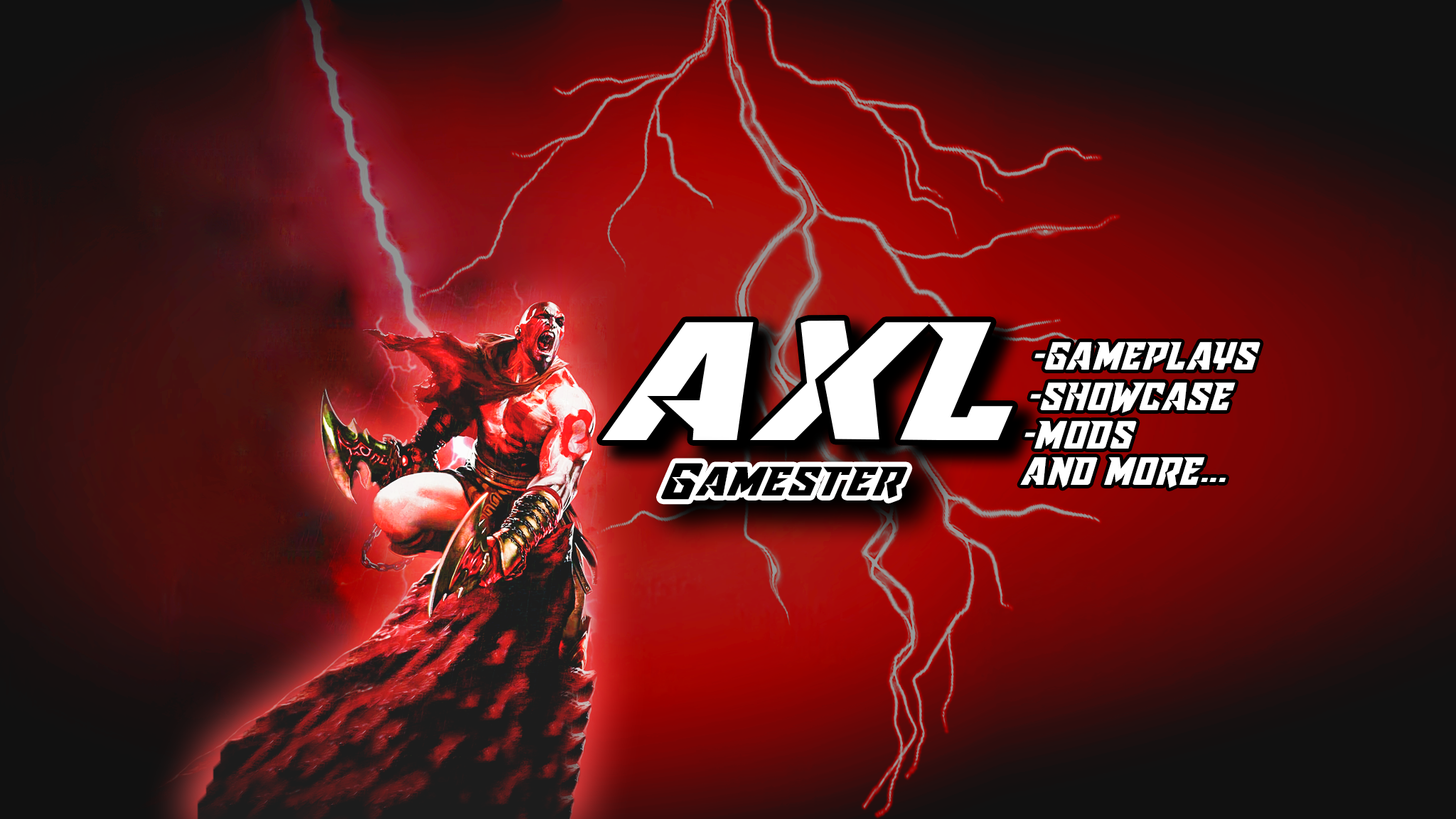
<style>
.page{position:relative;width:1456px;height:819px}
.page>*{position:absolute;margin:0}
.t1{font:31.3px "RaiderCrusaderExpanded";color:#ffffff}
.t2{font:40.9px "RaiderCrusader";color:#000000;scale:1.4 1}
</style>
<div class="page">
<p class="t1" style="left:1034px;top:342px;width:226px;height:28px">-GAMEPLAYS</p>
<p class="t1" style="left:1030px;top:382px;width:206px;height:31px">-SHOWCASE</p>
<p class="t1" style="left:1024px;top:421px;width:113px;height:28px">-MODS</p>
<p class="t1" style="left:1020px;top:457px;width:206px;height:31px">AND MORE...</p>
<p class="t2" style="left:661px;top:463px;width:247px;height:37px">Gamester</p>
</div>
